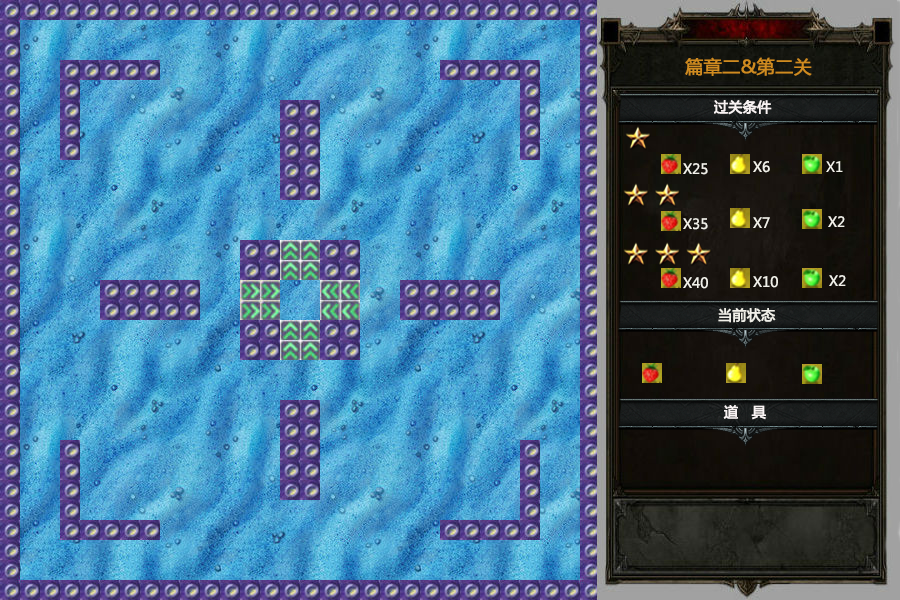
<style>
.page{position:relative;width:900px;height:600px}
.page>*{position:absolute;margin:0}
.t1{font:18px "MicrosoftYaHei";color:#cf8b20;font-weight:bold}
.t2{font:14px "MicrosoftYaHei";color:#f9f3f3;font-weight:bold}
.t3{font:14px "MicrosoftYaHei";color:#f1f0e9}
.t4{font:14px "MicrosoftYaHei";color:#f1f0e9;font-weight:bold}
</style>
<div class="page">
<p class="t1" style="left:685px;top:57px;width:127px;height:19px">篇章二&amp;第二关</p>
<p class="t2" style="left:714px;top:100px;width:58px;height:15px">过关条件</p>
<p class="t3" style="left:753px;top:161px;width:17px;height:12px">X6</p>
<p class="t3" style="left:683px;top:163px;width:25px;height:12px">X25</p>
<p class="t3" style="left:683px;top:218px;width:25px;height:12px">X35</p>
<p class="t3" style="left:753px;top:217px;width:17px;height:11px">X7</p>
<p class="t3" style="left:828px;top:216px;width:17px;height:11px">X2</p>
<p class="t3" style="left:683px;top:277px;width:25px;height:12px">X40</p>
<p class="t3" style="left:753px;top:276px;width:25px;height:12px">X10</p>
<p class="t3" style="left:829px;top:275px;width:17px;height:11px">X2</p>
<p class="t4" style="left:718px;top:308px;width:58px;height:15px">当前状态</p>
<p class="t2" style="left:723px;top:405px;width:43px;height:15px">道   具</p>
</div>
